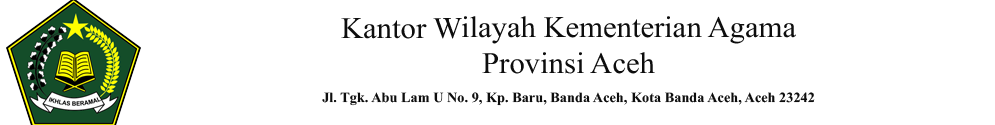
<style>
.page{position:relative;width:995px;height:125px;background:#ffffff}
.page>*{position:absolute;margin:0}
.t1{font:14px "TimesNewRomanPS-BoldMT";color:#0d0d0d}
.t2{font:30px "TimesNewRomanPSMT";color:#0d0d0d}
</style>
<div class="page">
<p class="t1" style="left:322px;top:16px;width:493px;height:90px;text-align:center"><span class="t2">Kantor Wilayah Kementerian Agama <br>Provinsi Aceh<br><br></span>Jl. Tgk. Abu Lam U No. 9, Kp. Baru, Banda Aceh, Kota Banda Aceh, Aceh 23242</p>
</div>
